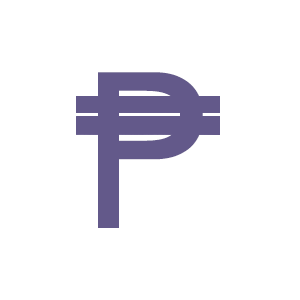
<style>
.page{position:relative;width:300px;height:300px;background:#ffffff}
.page>*{position:absolute;margin:0}
.t1{font:220px "Avenir-Medium";color:#63598a}
</style>
<div class="page">
<p class="t1" style="left:98px;top:72px;width:105px;height:156px">P</p>
</div>
